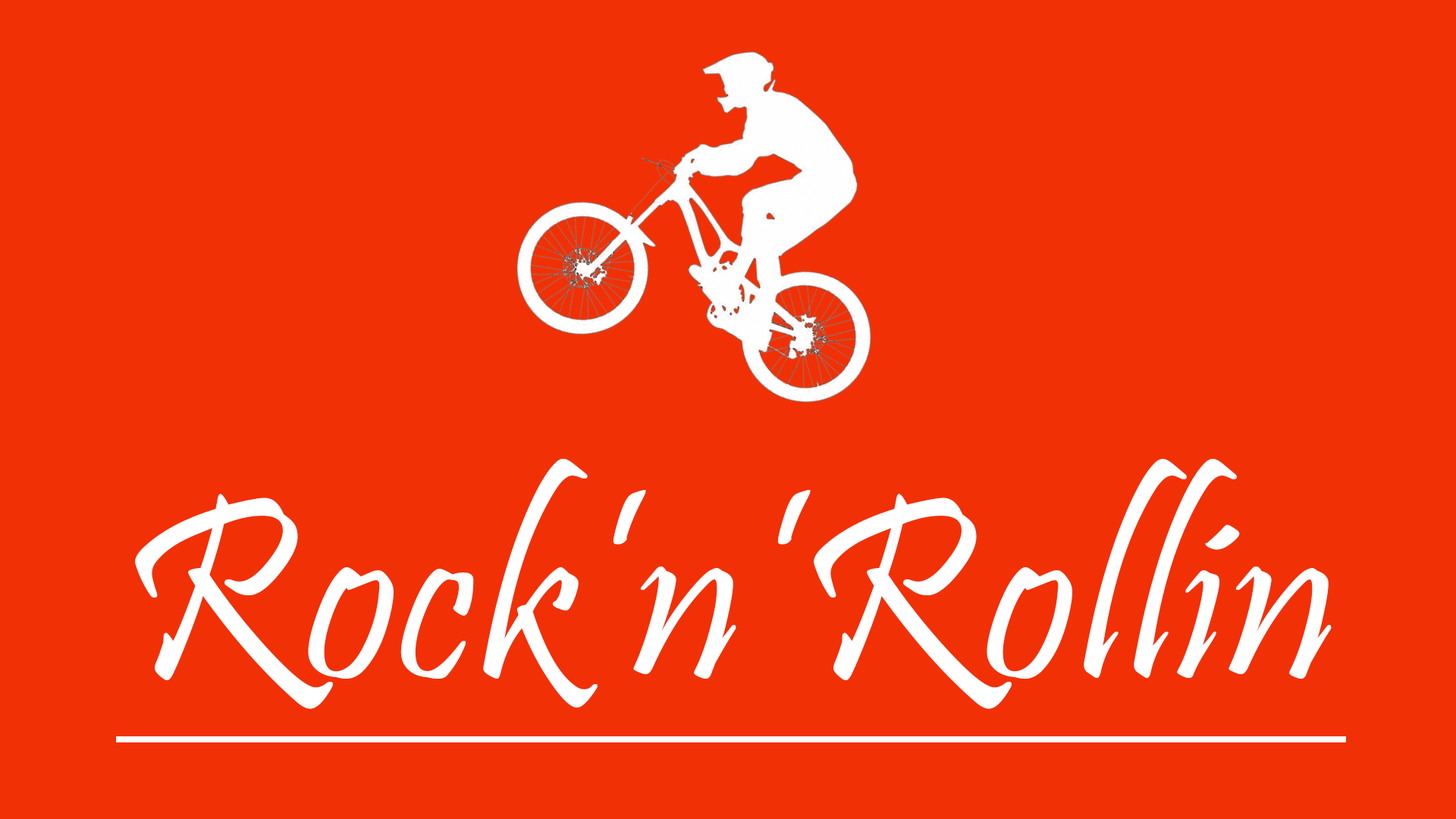
<style>
.page{position:relative;width:1456px;height:819px;background:#f23005}
.page>*{position:absolute;margin:0}
.t1{font:265.4px "Pristina-Regular";color:#ffffff}
</style>
<div class="page">
<p class="t1" style="left:135px;top:459px;width:1197px;height:250px">Rock’n’Rollin</p>
</div>
